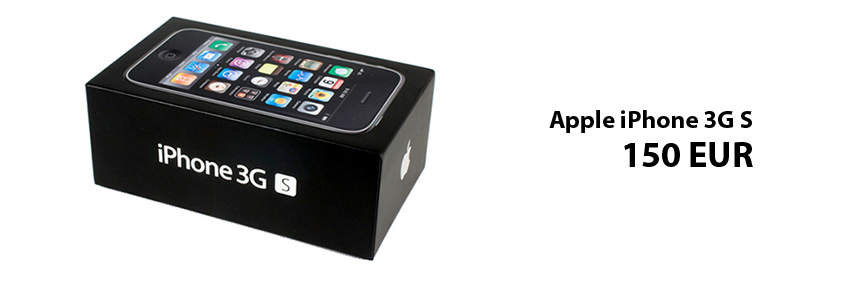
<style>
.page{position:relative;width:846px;height:282px;background:#ffffff}
.page>*{position:absolute;margin:0}
.t1{font:25px "MyriadPro-Bold";color:#000000}
.t2{font:36px "MyriadPro-Bold";color:#000000}
</style>
<div class="page">
<p class="t1" style="left:549px;top:110px;width:203px;height:23px">Apple iPhone 3G S</p>
<p class="t2" style="left:624px;top:142px;width:129px;height:25px">150 EUR</p>
</div>
